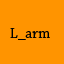
<style>
.page{position:relative;width:64px;height:64px;background:#ff9400}
.page>*{position:absolute;margin:0}
.t1{font:15px "ChaparralPro-Regular";color:#000000}
</style>
<div class="page">
<p class="t1" style="left:10px;top:28px;width:40px;height:12px">L_arm</p>
</div>
